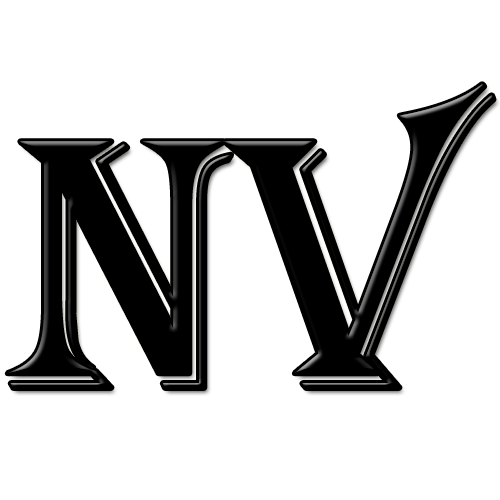
<style>
.page{position:relative;width:500px;height:500px;background:#ffffff}
.page>*{position:absolute;margin:0}
.t1{font:370px "Algerian";color:#000000}
</style>
<div class="page">
<p class="t1" style="left:7px;top:84px;width:487px;height:304px">NV</p>
</div>
